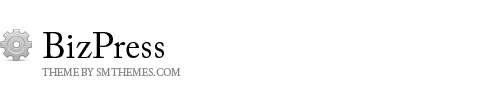
<style>
.page{position:relative;width:479px;height:100px;background:#ffffff}
.page>*{position:absolute;margin:0}
.t1{font:11px/18px "MinionPro-Regular";color:#878787;text-transform:uppercase}
.t2{font:36px/18px "ACaslonPro-Regular";color:#000000}
</style>
<div class="page">
<p class="t1" style="left:42px;top:32px;width:139px;height:44px"><span class="t2">BizPress<br></span>theme by smthemes.com</p>
</div>
